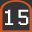
<style>
.page{position:relative;width:32px;height:32px;background:#333333}
.page>*{position:absolute;margin:0}
.t1{font:23.9px "Courier";letter-spacing:0.06em;color:#ffffff;font-weight:bold}
</style>
<div class="page">
<p class="t1" style="left:5px;top:9px;width:24px;height:16px">15</p>
</div>
